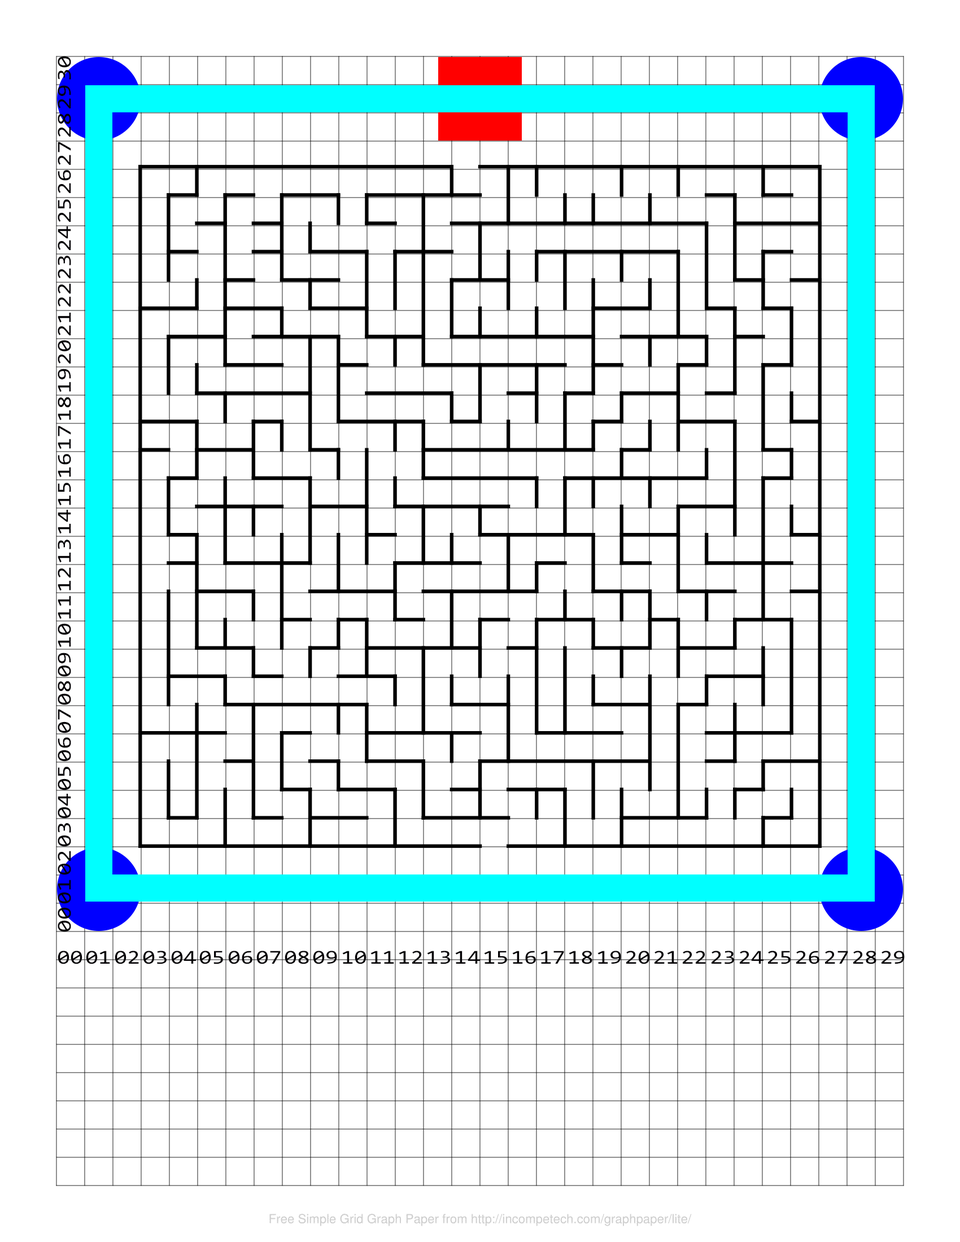
<style>
.page{position:relative;width:960px;height:1242px;background:#ffffff}
.page>*{position:absolute;margin:0}
.t1{font:20px "Consolas";color:#020003;scale:1.18 1}
</style>
<div class="page">
<p class="t1" style="left:58px;top:56px;width:13px;height:876px;rotate:-90deg">00 01 02 03 04 05 06 07 08 09 10 11 12 13 14 15 16 17 18 19 20 21 22 23 24 25 26 27 28 29 30</p>
<p class="t1" style="left:58px;top:951px;width:847px;height:13px">00 01 02 03 04 05 06 07 08 09 10 11 12 13 14 15 16 17 18 19 20 21 22 23 24 25 26 27 28 29</p>
</div>
